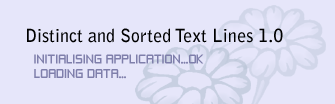
<style>
.page{position:relative;width:335px;height:104px;background:#e6e6fa}
.page>*{position:absolute;margin:0}
.t1{font:18px "BellGothicStd-Bold";color:#000000}
.t2{font:12px "ZeroThrees";color:#7f7fab}
</style>
<div class="page">
<p class="t1" style="left:27px;top:28px;width:256px;height:15px">Distinct and Sorted Text Lines 1.0</p>
<p class="t2" style="left:34px;top:54px;width:170px;height:25px">INITIALISING APPLICATION...OK<br>LOADING DATA...</p>
</div>
